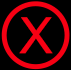
<style>
.page{position:relative;width:71px;height:70px;background:#000000}
.page>*{position:absolute;margin:0}
.t1{font:50px "ArialMT";letter-spacing:0.1em;color:#f80013}
</style>
<div class="page">
<p class="t1" style="left:19px;top:17px;width:34px;height:37px">X</p>
</div>
